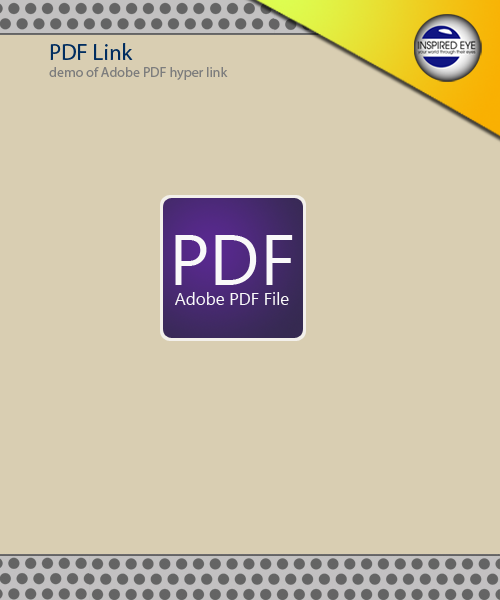
<style>
.page{position:relative;width:500px;height:600px;background:#d9ceb2}
.page>*{position:absolute;margin:0}
.t1{font:14px "MyriadPro-Regular";color:#7d7d7d}
.t2{font:23px "MyriadPro-Regular";color:#002d60}
.t3{font:17px "SegoeUI";color:#f9f9f9}
.t4{font:72px "SegoeUI";color:#f9f9f9}
</style>
<div class="page">
<p class="t1" style="left:49px;top:43px;width:179px;height:37px"><span class="t2">PDF Link<br></span>demo of Adobe PDF hyper link</p>
<p class="t3" style="left:175px;top:235px;width:118px;height:70px;text-align:center"><span class="t4">PDF<br></span>Adobe PDF File</p>
</div>
